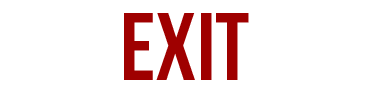
<style>
.page{position:relative;width:368px;height:95px;background:#ffffff}
.page>*{position:absolute;margin:0}
.t1{font:96px "BebasNeueBold";color:#9f0000}
</style>
<div class="page">
<p class="t1" style="left:124px;top:13px;width:125px;height:67px">Exit</p>
</div>
